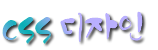
<style>
.page{position:relative;width:158px;height:50px;background:#ffffff}
.page>*{position:absolute;margin:0}
.t1{font:30px "HSGyoulnoonkot"}
</style>
<div class="page">
<p class="t1" style="left:2px;top:11px;width:141px;height:33px">CSS 디자인</p>
</div>
